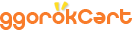
<style>
.page{position:relative;width:133px;height:31px;background:#ffffff}
.page>*{position:absolute;margin:0}
.t1{font:24px "Optien";color:#f87c2a}
</style>
<div class="page">
<p class="t1" style="left:0px;top:9px;width:132px;height:21px">ggorokCart</p>
</div>
